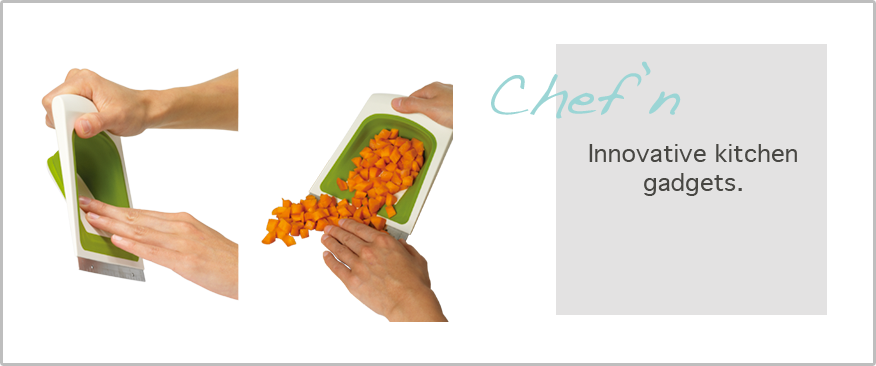
<style>
.page{position:relative;width:876px;height:366px;background:#ffffff}
.page>*{position:absolute;margin:0}
.t1{font:60px "Handwriting-Dakota";color:#9bd5d5}
.t2{font:24px "Geneva";color:#484743}
</style>
<div class="page">
<p class="t1" style="left:491px;top:61px;width:190px;height:58px">Chef’n</p>
<p class="t2" style="left:589px;top:144px;width:208px;height:52px;text-align:center">Innovative kitchen gadgets.</p>
</div>
